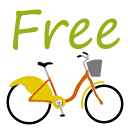
<style>
.page{position:relative;width:128px;height:128px;background:#ffffff}
.page>*{position:absolute;margin:0}
.t1{font:53.8px "SegoePrint";color:#99ae19}
</style>
<div class="page">
<p class="t1" style="left:13px;top:9px;width:107px;height:41px">Free</p>
</div>
